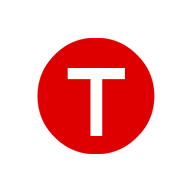
<style>
.page{position:relative;width:192px;height:192px;background:#ffffff}
.page>*{position:absolute;margin:0}
.t1{font:127.8px "Telegrafico";color:#ffffff}
</style>
<div class="page">
<p class="t1" style="left:67px;top:68px;width:58px;height:68px">T</p>
</div>
